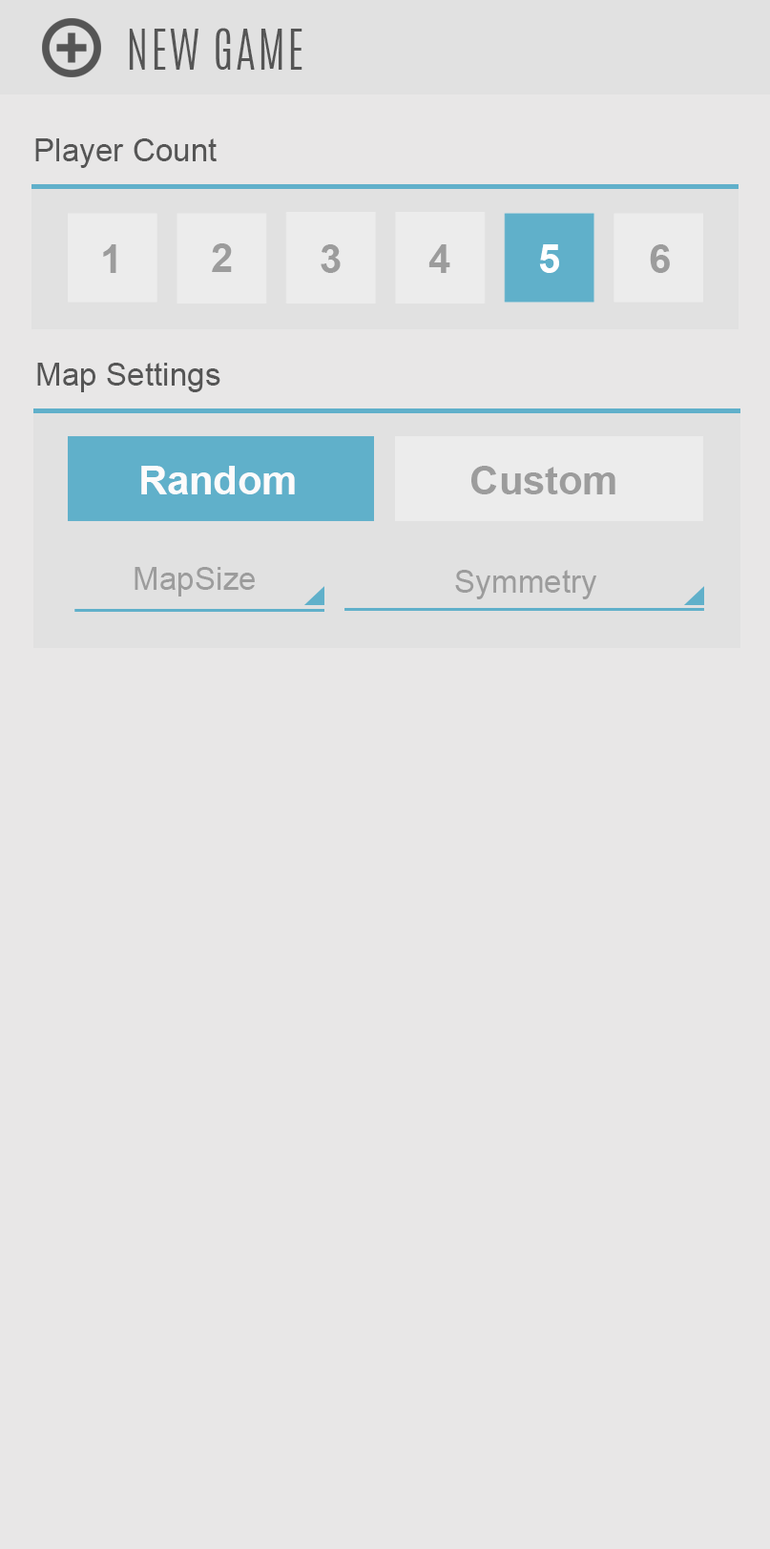
<style>
.page{position:relative;width:770px;height:1549px;background:#e8e7e7}
.page>*{position:absolute;margin:0}
.t1{font:47.7px "Antonio-Light";letter-spacing:0.045em;color:#555555}
.t2{font:31.8px "ArialMT";color:#555555}
.t3{font:39.8px "Arial-BoldMT";color:#9c9c9c}
.t4{font:39.8px "Arial-BoldMT";color:#ffffff}
.t5{font:39.8px "Arial-BoldMT";color:#fdfbfb}
.t6{font:31.8px "ArialMT";color:#9c9c9c}
</style>
<div class="page">
<p class="t1" style="left:129px;top:28px;width:173px;height:42px">NEW GAME</p>
<p class="t2" style="left:35px;top:138px;width:182px;height:30px">Player Count</p>
<p class="t3" style="left:103px;top:244px;width:13px;height:29px">1</p>
<p class="t3" style="left:212px;top:243px;width:20px;height:29px">2</p>
<p class="t3" style="left:321px;top:244px;width:20px;height:29px">3</p>
<p class="t3" style="left:428px;top:244px;width:22px;height:29px">4</p>
<p class="t4" style="left:539px;top:244px;width:20px;height:29px">5</p>
<p class="t3" style="left:650px;top:244px;width:20px;height:29px">6</p>
<p class="t2" style="left:37px;top:363px;width:183px;height:29px">Map Settings</p>
<p class="t5" style="left:141px;top:466px;width:154px;height:28px">Random</p>
<p class="t3" style="left:471px;top:466px;width:144px;height:28px">Custom</p>
<p class="t6" style="left:135px;top:567px;width:120px;height:29px">MapSize</p>
<p class="t6" style="left:455px;top:570px;width:141px;height:29px">Symmetry</p>
</div>
